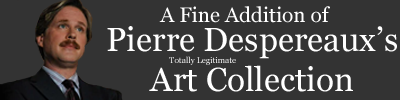
<style>
.page{position:relative;width:400px;height:100px;background:#333333}
.page>*{position:absolute;margin:0}
.t1{font:20.8px "Georgia";color:#ffffff}
.t2{font:33.2px "Georgia";color:#ffffff}
</style>
<div class="page">
<p class="t1" style="left:159px;top:6px;width:171px;height:17px">A Fine Addition of</p>
<p class="t2" style="left:107px;top:26px;width:290px;height:66px;text-align:center">Pierre Despereaux’s<br>Art Collection</p>
</div>
